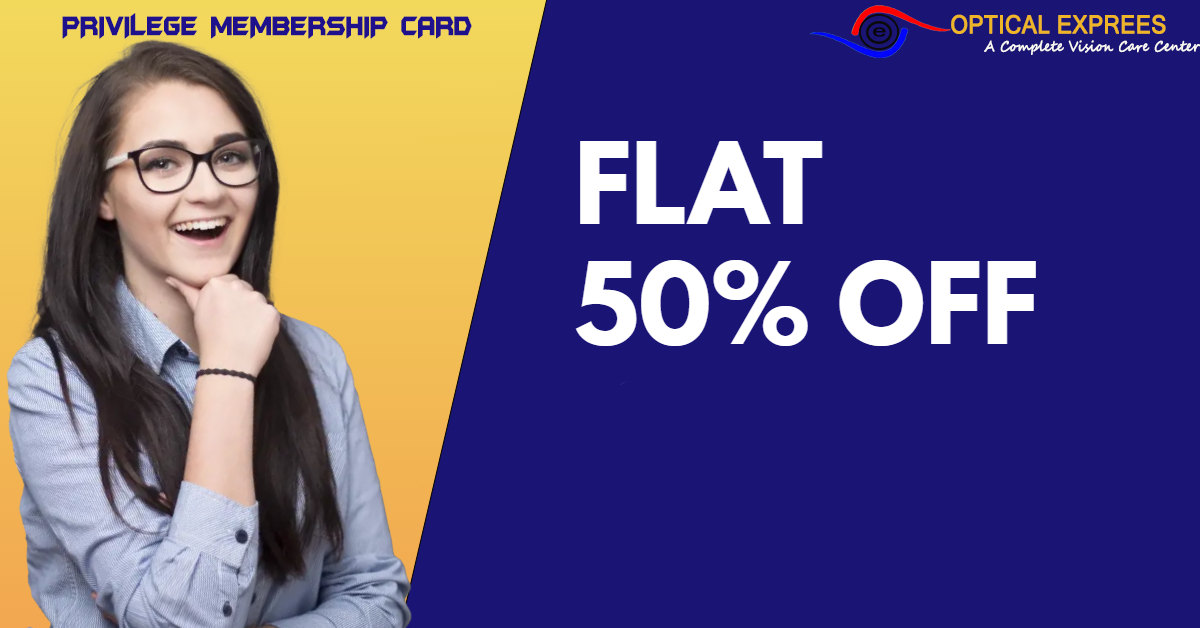
<style>
.page{position:relative;width:1200px;height:628px;background:#1a1474}
.page>*{position:absolute;margin:0}
.t1{font:31.1px "BatmanForeverAlternate";color:#1f108b;font-variant:small-caps;font-weight:bold;scale:0.7 1}
.t2{font:24.9px "MicrosoftSansSerif";color:#efb528;font-variant:small-caps;font-weight:bold;scale:0.9 1}
.t3{font:17px "MicrosoftSansSerif";color:#080606;scale:1.5 1}
.t4{font:14.1px "SegoeScript";color:#f8f7f3;font-weight:bold;scale:0.89 1}
</style>
<div class="page">
<p class="t1" style="left:62px;top:13px;width:410px;height:26px">PRIVILEGE MEMBERSHIP CARD</p>
<p class="t2" style="left:951px;top:14px;width:215px;height:20px">OPTICAL EXPREES</p>
<p class="t3" style="left:873px;top:27px;width:13px;height:10px">e</p>
<p class="t4" style="left:984px;top:40px;width:216px;height:15px">A Complete Vision Care Center</p>
</div>
